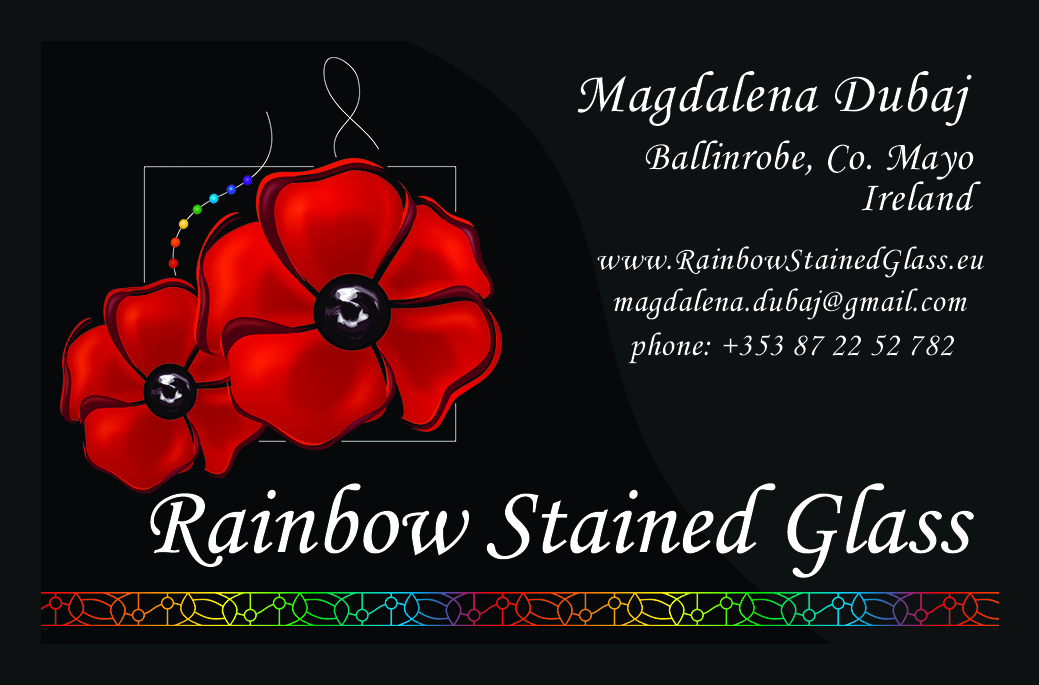
<style>
.page{position:relative;width:1039px;height:685px;background:#070809}
.page>*{position:absolute;margin:0}
.t1{font:58.3px "MonotypeCorsiva";letter-spacing:0.02em;color:#feffff}
.t2{font:41.7px/41.7px "MonotypeCorsiva";letter-spacing:0.02em;color:#feffff}
.t3{font:33.3px/41.7px "MonotypeCorsiva";letter-spacing:0.02em;color:#feffff}
.t4{font:33.3px "MonotypeCorsiva";letter-spacing:0.02em;color:#feffff}
.t5{font:100px "MonotypeCorsiva";color:#ffffff}
</style>
<div class="page">
<p class="t1" style="left:577px;top:71px;width:395px;height:55px">Magdalena Dubaj</p>
<p class="t2" style="left:645px;top:140px;width:336px;height:71px">Ballinrobe, Co. Mayo<br>          Ireland</p>
<p class="t3" style="left:597px;top:246px;width:387px;height:74px">www.RainbowStainedGlass.eu<br>  magdalena.dubaj@gmail.com</p>
<p class="t4" style="left:628px;top:332px;width:326px;height:32px">phone: +353 87 22 52 782</p>
<p class="t5" style="left:150px;top:483px;width:824px;height:95px">Rainbow Stained Glass</p>
</div>
